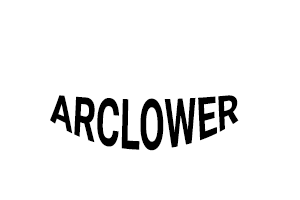
<style>
.page{position:relative;width:300px;height:200px;background:#ffffff}
.page>*{position:absolute;margin:0}
.t1{font:36px "Roboto-Bold";color:#000000}
</style>
<div class="page">
<p class="t1" style="left:50px;top:95px;width:189px;height:56px">ARCLOWER</p>
</div>
